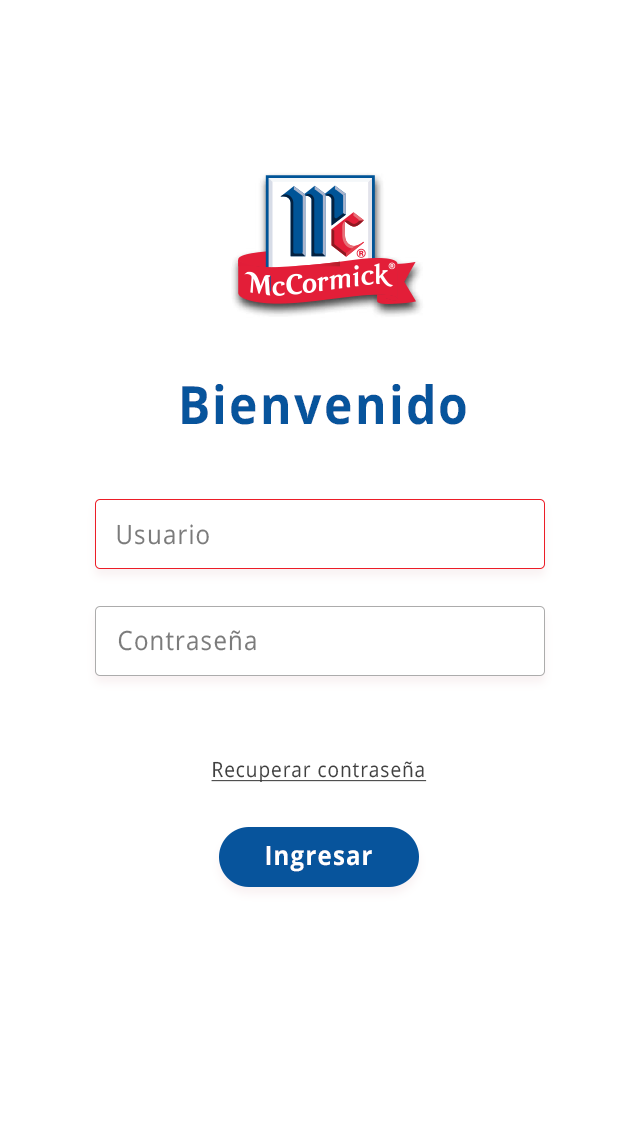
<style>
.page{position:relative;width:640px;height:1136px;background:#ffffff}
.page>*{position:absolute;margin:0}
.t1{font:52.8px "OpenSans-Bold";letter-spacing:0.05em;color:#07549c;scale:0.91 1}
.t2{font:26.4px "OpenSans-Regular";letter-spacing:0.05em;color:#7b7b7b;scale:0.91 1}
.t3{font:20.9px "OpenSans-Regular";letter-spacing:0.05em;color:#3f3f3f;text-decoration:underline;scale:0.91 1}
.t4{font:26.4px "OpenSans-Bold";letter-spacing:0.05em;color:#ffffff;scale:0.91 1}
</style>
<div class="page">
<p class="t1" style="left:182px;top:384px;width:284px;height:41px">Bienvenido</p>
<p class="t2" style="left:117px;top:524px;width:92px;height:21px">Usuario</p>
<p class="t2" style="left:118px;top:630px;width:138px;height:21px">Contraseña</p>
<p class="t3" style="left:211px;top:761px;width:216px;height:21px">Recuperar contraseña</p>
<p class="t4" style="left:266px;top:846px;width:106px;height:26px">Ingresar</p>
</div>
